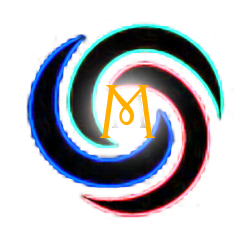
<style>
.page{position:relative;width:249px;height:243px;background:#ffffff}
.page>*{position:absolute;margin:0}
.t1{font:77px "Harrington";color:#ffae00}
</style>
<div class="page">
<p class="t1" style="left:99px;top:85px;width:56px;height:53px">M</p>
</div>
